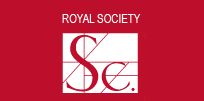
<style>
.page{position:relative;width:204px;height:101px;background:#bd0e2b}
.page>*{position:absolute;margin:0}
.t1{font:12px "ArialNarrow";color:#ffffff}
</style>
<div class="page">
<p class="t1" style="left:62px;top:14px;width:79px;height:9px">ROYAL SOCIETY</p>
</div>
